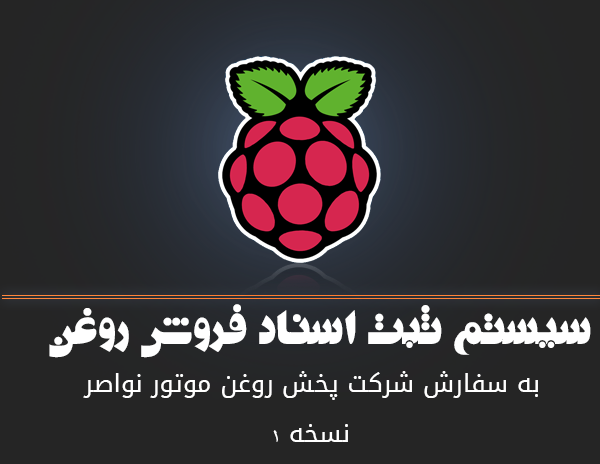
<style>
.page{position:relative;width:600px;height:464px;background:#252525}
.page>*{position:absolute;margin:0}
.t1{font:53.3px "Far.TitrDF";color:#ffffff}
.t2{font:25.4px "DroidArabicKufi";color:#ffffff}
.t3{font:25.4px "AdobeArabic-Regular";color:#ffffff}
</style>
<div class="page">
<p class="t1" style="left:49px;top:304px;width:542px;height:54px">سیستم ثبت اسناد فروش روغن</p>
<p class="t2" style="left:83px;top:371px;width:455px;height:29px">به سفارش شرکت پخش روغن موتور نواصر</p>
<p class="t2" style="left:273px;top:424px;width:75px;height:18px">نسخه <span class="t3">1</span></p>
</div>
